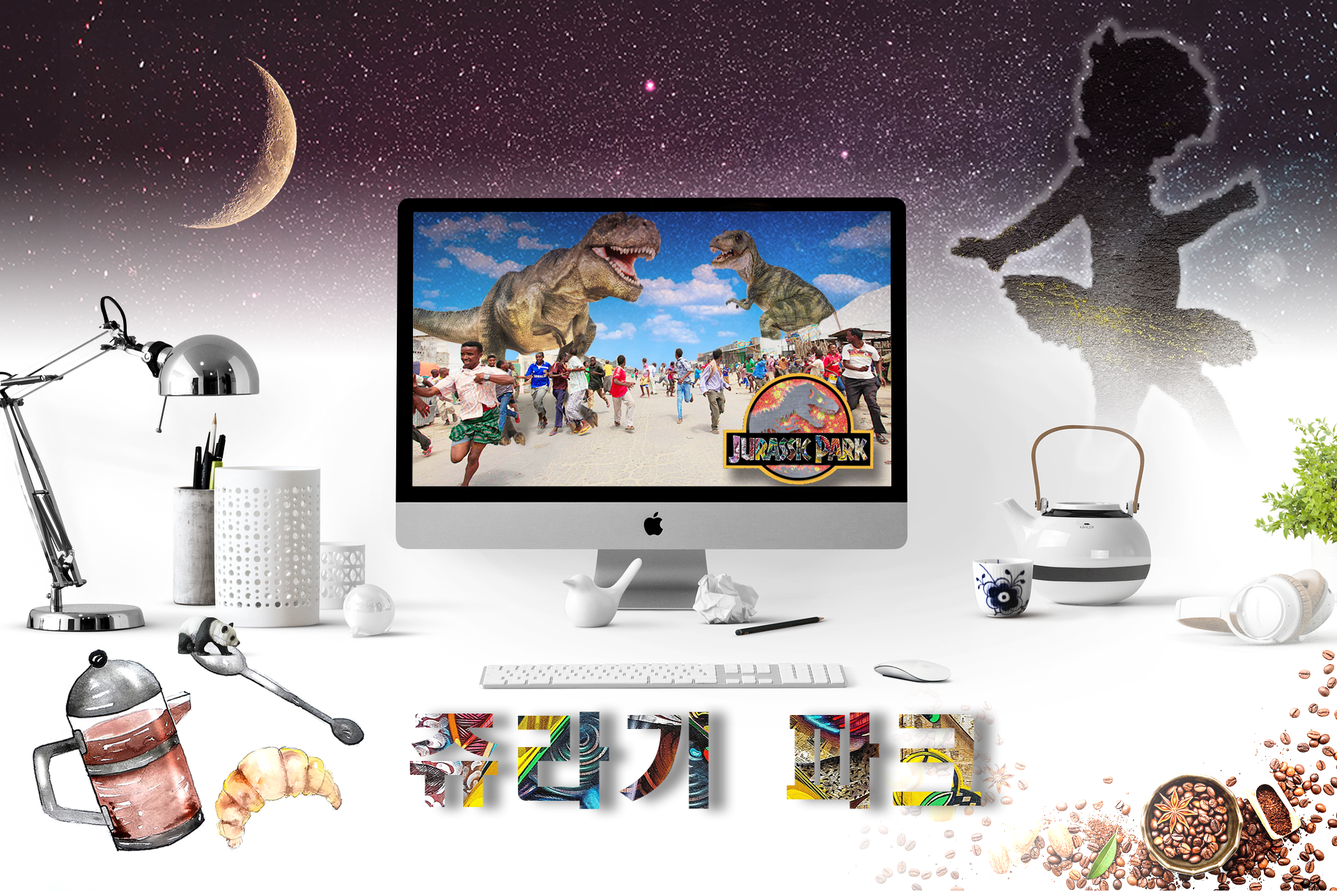
<style>
.page{position:relative;width:1337px;height:892px}
.page>*{position:absolute;margin:0}
.t1{font:100.7px "HeadlineR-HM";letter-spacing:0.06em}
</style>
<div class="page">
<p class="t1" style="left:410px;top:711px;width:571px;height:98px">쥬라기 파크</p>
</div>
